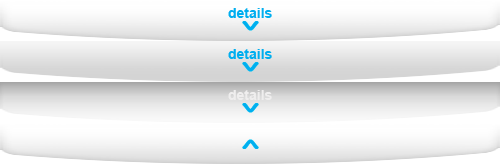
<style>
.page{position:relative;width:500px;height:167px}
.page>*{position:absolute;margin:0}
.t1{font:14px "Arial-BoldMT";color:#00aeef}
.t2{font:14px "Arial-BoldMT";color:#efeeee}
</style>
<div class="page">
<p class="t1" style="left:228px;top:8px;width:44px;height:10px">details</p>
<p class="t1" style="left:228px;top:49px;width:44px;height:10px">details</p>
<p class="t2" style="left:228px;top:90px;width:44px;height:10px">details</p>
</div>
